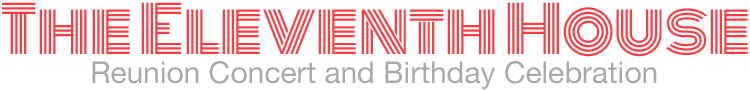
<style>
.page{position:relative;width:750px;height:90px;background:#ffffff}
.page>*{position:absolute;margin:0}
.t1{font:63.2px "Monoton-Regular";color:#ff3b42}
.t2{font:30px "HelveticaNeue";color:#aaaaaa}
</style>
<div class="page">
<p class="t1" style="left:2px;top:2px;width:746px;height:55px">The Eleventh House</p>
<p class="t2" style="left:92px;top:61px;width:565px;height:29px">Reunion Concert and Birthday Celebration</p>
</div>
